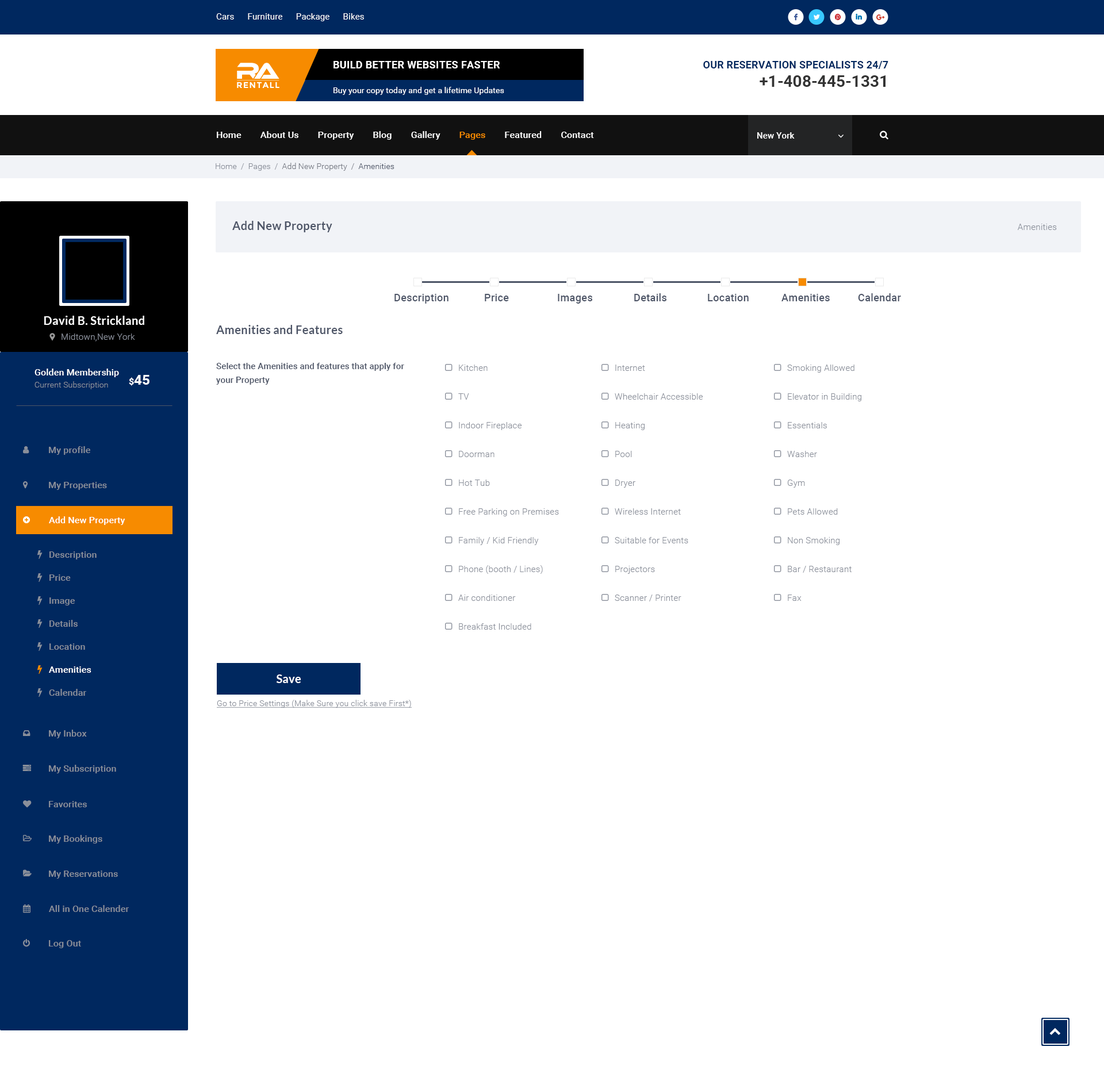
<style>
.page{position:relative;width:1104px;height:1081px;background:#ffffff}
.page>*{position:absolute;margin:0}
.t1{font:8.6px "Roboto-Regular";letter-spacing:0.01em;color:#ffffff}
.t2{font:10.3px "Roboto-Bold";letter-spacing:0.02em;color:#ffffff;text-transform:uppercase}
.t3{font:10.3px "Roboto-Bold";letter-spacing:0.01em;color:#00285f;text-transform:uppercase}
.t4{font:16.1px "Roboto-Bold";color:#333333}
.t5{font:8.4px "Montserrat-Bold";letter-spacing:0.08em;color:#ffffff;text-transform:uppercase}
.t6{font:8px "Roboto-Regular";letter-spacing:0.01em;color:#ffffff}
.t7{font:9.2px "Roboto-Medium";letter-spacing:0.01em;color:#ffffff}
.t8{font:9.2px "Roboto-Medium";letter-spacing:0.01em;color:#f78b00}
.t9{font:8.6px "Roboto-Medium";letter-spacing:0.01em;color:#ffffff}
.t10{font:8px "Roboto-Light";letter-spacing:0.01em;color:#757983}
.t11{font:8px "Roboto-Light";letter-spacing:0.01em;color:#8a8f9a}
.t12{font:8px "Roboto-Light";letter-spacing:0.01em;color:#4d5567}
.t13{font:11.5px "Lato-Bold";letter-spacing:0.01em;color:#4d5567}
.t14{font:8.6px "Roboto-Light";letter-spacing:0.01em;color:#8a8f9a}
.t15{font:10.3px "Roboto-Medium";letter-spacing:0.01em;color:#4d5567}
.t16{font:11.5px "Lato-Bold";letter-spacing:0.01em;color:#ffffff}
.t17{font:8.6px/13.8px "Roboto-Medium";letter-spacing:0.01em;color:#4d5567}
.t18{font:8.6px/28.7px "Roboto-Light";letter-spacing:0.01em;color:#8a8f9a}
.t19{font:13.8px "Roboto-Bold";letter-spacing:0.01em;color:#ffffff}
.t20{font:9.2px "Roboto-Bold";letter-spacing:0.01em;color:#ffffff}
.t21{font:9.2px "Roboto-Medium";letter-spacing:0.01em;color:#8a8f9a}
.t22{font:9.2px/23px "Roboto-Medium";letter-spacing:0.01em;color:#8a8f9a}
.t23{font:9.2px/23px "Roboto-Medium";letter-spacing:0.01em;color:#ffffff}
.t24{font:8px "Roboto-Light";letter-spacing:0.01em;color:#8a8f9a;text-decoration:underline}
</style>
<div class="page">
<p class="t1" style="left:216px;top:13px;width:148px;height:8px">Cars      Furniture      Package      Bikes</p>
<p class="t2" style="left:333px;top:61px;width:167px;height:7px">Build better Websites Faster</p>
<p class="t3" style="left:703px;top:61px;width:185px;height:8px">Our Reservation Specialists 24/7</p>
<p class="t4" style="left:759px;top:75px;width:126px;height:12px">+1-408-445-1331</p>
<p class="t5" style="left:237px;top:82px;width:42px;height:6px">RentAll</p>
<p class="t6" style="left:333px;top:87px;width:171px;height:8px">Buy your copy today and get a lifetime Updates</p>
<p class="t7" style="left:217px;top:131px;width:377px;height:9px">Home        About Us        Property        Blog        Gallery        <span class="t8">Pages</span>        Featured        Contact</p>
<p class="t9" style="left:757px;top:132px;width:37px;height:7px">New York</p>
<p class="t10" style="left:216px;top:163px;width:178px;height:8px"><span class="t11">Home  /  Pages  /  </span>Add New Property  /  <span class="t12">Amenities</span></p>
<p class="t13" style="left:232px;top:221px;width:100px;height:11px">Add New Property</p>
<p class="t14" style="left:1017px;top:224px;width:39px;height:6px">Amenities</p>
<p class="t15" style="left:394px;top:294px;width:54px;height:9px">Description</p>
<p class="t15" style="left:485px;top:294px;width:24px;height:7px">Price</p>
<p class="t15" style="left:558px;top:294px;width:34px;height:9px">Images</p>
<p class="t15" style="left:634px;top:293px;width:32px;height:8px">Details</p>
<p class="t15" style="left:708px;top:294px;width:40px;height:7px">Location</p>
<p class="t15" style="left:781px;top:294px;width:48px;height:7px">Amenities</p>
<p class="t15" style="left:858px;top:293px;width:43px;height:8px">Calendar</p>
<p class="t16" style="left:44px;top:316px;width:100px;height:9px">David B. Strickland</p>
<p class="t13" style="left:216px;top:325px;width:127px;height:9px">Amenities and Features</p>
<p class="t14" style="left:61px;top:333px;width:74px;height:8px">Midtown,New York</p>
<p class="t17" style="left:216px;top:363px;width:188px;height:22px">Select the Amenities and features that apply for<br>your Property</p>
<p class="t18" style="left:458px;top:364px;width:101px;height:265px">Kitchen<br>TV<br>Indoor Fireplace<br>Doorman<br>Hot Tub<br>Free Parking on Premises<br>Family / Kid Friendly<br>Phone (booth / Lines)<br>Air conditioner<br>Breakfast Included</p>
<p class="t18" style="left:614px;top:364px;width:89px;height:237px">Internet<br>Wheelchair Accessible<br>Heating<br>Pool<br>Dryer<br>Wireless Internet<br>Suitable for Events<br>Projectors<br>Scanner / Printer</p>
<p class="t18" style="left:787px;top:364px;width:74px;height:237px">Smoking Allowed<br>Elevator in Building<br>Essentials<br>Washer<br>Gym<br>Pets Allowed<br>Non Smoking<br>Bar / Restaurant<br>Fax</p>
<p class="t7" style="left:34px;top:368px;width:85px;height:9px">Golden Membership</p>
<p class="t19" style="left:129px;top:375px;width:20px;height:11px"><span class="t20">$</span>45</p>
<p class="t11" style="left:34px;top:381px;width:74px;height:8px">Current Subscription</p>
<p class="t21" style="left:49px;top:446px;width:41px;height:9px">My profile</p>
<p class="t21" style="left:49px;top:482px;width:58px;height:8px">My Properties</p>
<p class="t7" style="left:49px;top:516px;width:76px;height:9px">Add New Property</p>
<p class="t22" style="left:49px;top:551px;width:48px;height:144px">Description<br>Price<br>Image<br>Details<br>Location<span class="t23"><br>Amenities<br></span>Calendar</p>
<p class="t16" style="left:276px;top:674px;width:25px;height:9px">Save</p>
<p class="t24" style="left:217px;top:699px;width:195px;height:9px">Go to Price Settings (Make Sure you click save First*)</p>
<p class="t21" style="left:49px;top:729px;width:38px;height:9px">My Inbox</p>
<p class="t21" style="left:49px;top:764px;width:67px;height:9px">My Subscription</p>
<p class="t21" style="left:49px;top:801px;width:38px;height:6px">Favorites</p>
<p class="t21" style="left:49px;top:835px;width:53px;height:8px">My Bookings</p>
<p class="t21" style="left:49px;top:870px;width:69px;height:8px">My Reservations</p>
<p class="t21" style="left:49px;top:905px;width:80px;height:7px">All in One Calender</p>
<p class="t21" style="left:49px;top:940px;width:32px;height:8px">Log Out</p>
</div>
